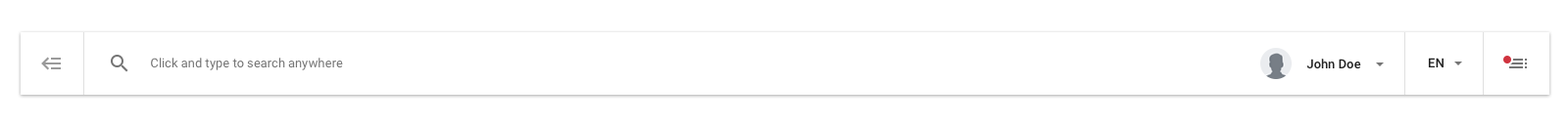
<style>
.page{position:relative;width:1568px;height:125px;background:#ffffff}
.page>*{position:absolute;margin:0}
.t1{font:12.7px "Roboto-Regular";color:#757575}
.t2{font:12.7px "Roboto-Medium";color:#212121}
</style>
<div class="page">
<p class="t1" style="left:151px;top:58px;width:192px;height:13px">Click and type to search anywhere</p>
<p class="t2" style="left:1306px;top:59px;width:55px;height:11px">John Doe</p>
<p class="t2" style="left:1428px;top:58px;width:16px;height:10px">EN</p>
</div>
